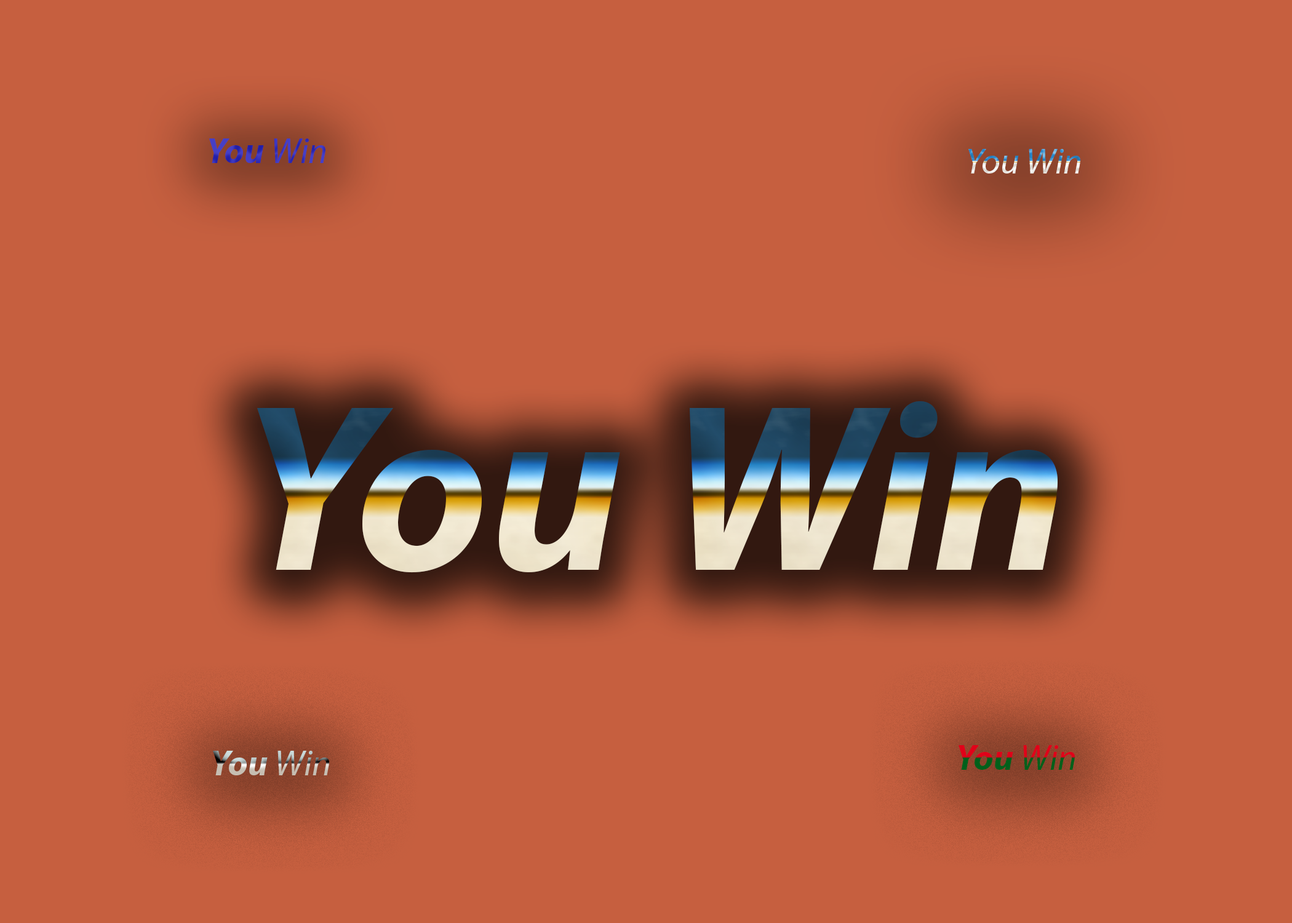
<style>
.page{position:relative;width:1292px;height:923px;background:#c65f3f}
.page>*{position:absolute;margin:0}
.t1{font:35.9px "MyriadPro-BoldIt";color:#463fc6}
.t2{font:35.9px "MyriadPro-It";color:#463fc6}
.t3{font:35.9px "MyriadPro-It"}
.t4{font:239.9px "MyriadPro-BoldIt"}
.t5{font:35.9px "MyriadPro-BoldIt"}
</style>
<div class="page">
<p class="t1" style="left:209px;top:138px;width:116px;height:25px">You <span class="t2">Win</span></p>
<p class="t3" style="left:968px;top:149px;width:112px;height:25px">You Win</p>
<p class="t4" style="left:257px;top:401px;width:801px;height:172px">You Win</p>
<p class="t5" style="left:959px;top:745px;width:116px;height:25px">You <span class="t3">Win</span></p>
<p class="t5" style="left:213px;top:751px;width:116px;height:24px">You <span class="t3">Win</span></p>
</div>
